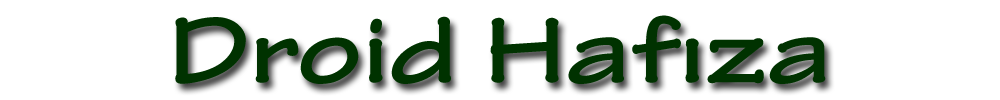
<style>
.page{position:relative;width:1000px;height:100px;background:#ffffff}
.page>*{position:absolute;margin:0}
.t1{font:100px "TektonPro-BoldExt";letter-spacing:0.01em;color:#003200}
</style>
<div class="page">
<p class="t1" style="left:175px;top:15px;width:651px;height:69px">Droid Hafıza</p>
</div>
